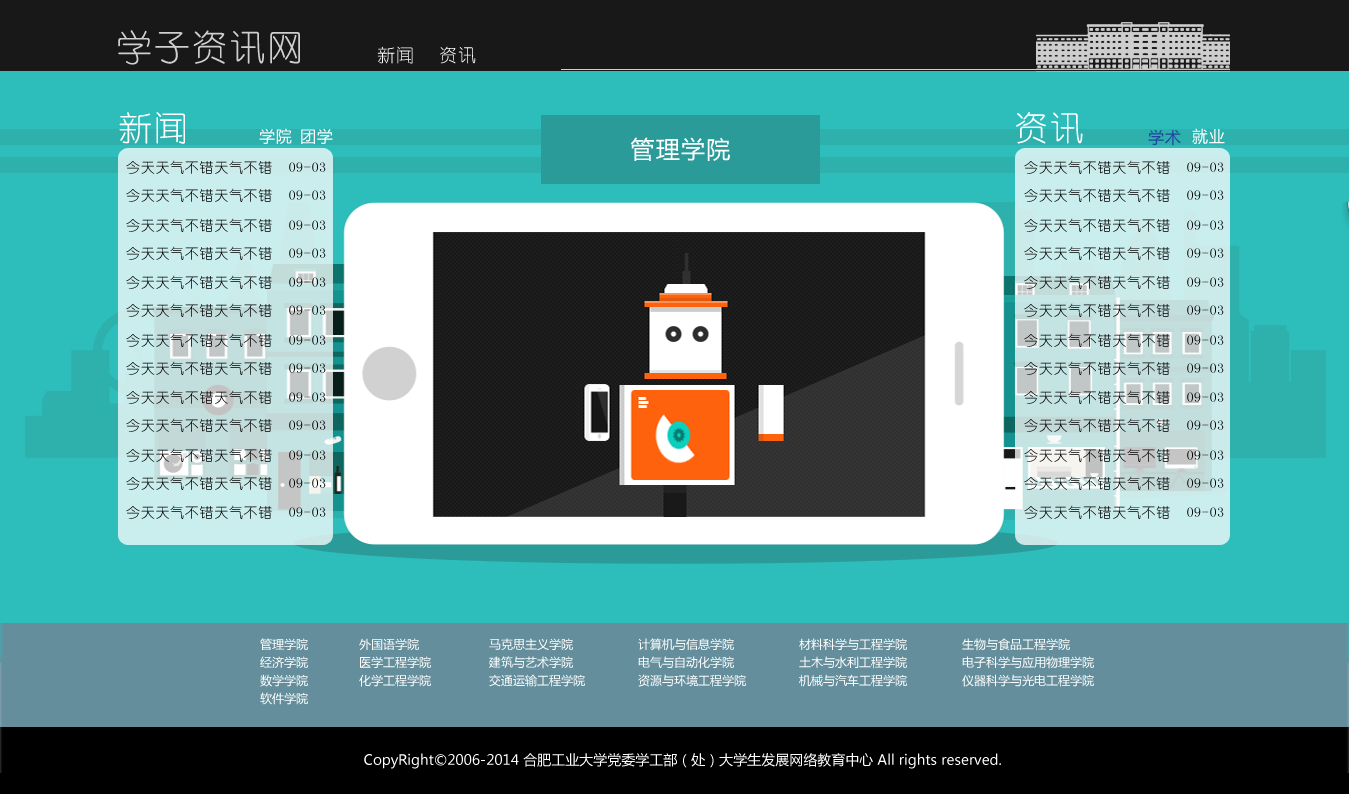
<style>
.page{position:relative;width:1349px;height:794px;background:#2dbdba}
.page>*{position:absolute;margin:0}
.t1{font:36px "YouYuan";letter-spacing:0.05em;color:#cfcfcf}
.t2{font:18px "YouYuan";letter-spacing:0.05em;color:#ffffff}
.t3{font:34px "YouYuan";letter-spacing:0.05em;color:#ffffff}
.t4{font:16px "MicrosoftYaHei";letter-spacing:0.05em;color:#ffffff}
.t5{font:24px "MicrosoftYaHei";letter-spacing:0.05em;color:#ffffff}
.t6{font:16px "MicrosoftYaHei";letter-spacing:0.05em;color:#1e459e}
.t7{font:14px "YouYuan";letter-spacing:0.05em;color:#000000}
.t8{font:12px/18px "MicrosoftYaHei";color:#ffffff}
.t9{font:14px "MicrosoftYaHei";color:#ffffff}
</style>
<div class="page">
<p class="t1" style="left:118px;top:30px;width:182px;height:35px">学子资讯网</p>
<p class="t2" style="left:377px;top:46px;width:36px;height:18px">新闻</p>
<p class="t2" style="left:440px;top:46px;width:36px;height:18px">资讯</p>
<p class="t3" style="left:119px;top:112px;width:66px;height:32px">新闻</p>
<p class="t3" style="left:1016px;top:112px;width:67px;height:32px">资讯</p>
<p class="t4" style="left:259px;top:128px;width:33px;height:16px">学院</p>
<p class="t4" style="left:301px;top:128px;width:32px;height:16px">团学</p>
<p class="t5" style="left:630px;top:137px;width:100px;height:24px">管理学院</p>
<p class="t6" style="left:1148px;top:129px;width:33px;height:17px">学术</p>
<p class="t4" style="left:1192px;top:128px;width:33px;height:17px">就业</p>
<p class="t7" style="left:126px;top:160px;width:200px;height:14px">今天天气不错天气不错  09-03</p>
<p class="t7" style="left:1024px;top:160px;width:200px;height:14px">今天天气不错天气不错  09-03</p>
<p class="t7" style="left:126px;top:188px;width:200px;height:14px">今天天气不错天气不错  09-03</p>
<p class="t7" style="left:1024px;top:188px;width:200px;height:14px">今天天气不错天气不错  09-03</p>
<p class="t7" style="left:126px;top:218px;width:200px;height:14px">今天天气不错天气不错  09-03</p>
<p class="t7" style="left:1024px;top:218px;width:200px;height:14px">今天天气不错天气不错  09-03</p>
<p class="t7" style="left:126px;top:246px;width:200px;height:14px">今天天气不错天气不错  09-03</p>
<p class="t7" style="left:1024px;top:246px;width:200px;height:14px">今天天气不错天气不错  09-03</p>
<p class="t7" style="left:126px;top:275px;width:200px;height:14px">今天天气不错天气不错  09-03</p>
<p class="t7" style="left:1024px;top:275px;width:200px;height:14px">今天天气不错天气不错  09-03</p>
<p class="t7" style="left:126px;top:303px;width:200px;height:14px">今天天气不错天气不错  09-03</p>
<p class="t7" style="left:1024px;top:303px;width:200px;height:14px">今天天气不错天气不错  09-03</p>
<p class="t7" style="left:126px;top:333px;width:200px;height:14px">今天天气不错天气不错  09-03</p>
<p class="t7" style="left:1024px;top:333px;width:200px;height:14px">今天天气不错天气不错  09-03</p>
<p class="t7" style="left:126px;top:361px;width:200px;height:14px">今天天气不错天气不错  09-03</p>
<p class="t7" style="left:1024px;top:361px;width:200px;height:14px">今天天气不错天气不错  09-03</p>
<p class="t7" style="left:126px;top:390px;width:200px;height:14px">今天天气不错天气不错  09-03</p>
<p class="t7" style="left:1024px;top:390px;width:200px;height:14px">今天天气不错天气不错  09-03</p>
<p class="t7" style="left:126px;top:418px;width:200px;height:14px">今天天气不错天气不错  09-03</p>
<p class="t7" style="left:1024px;top:418px;width:200px;height:14px">今天天气不错天气不错  09-03</p>
<p class="t7" style="left:126px;top:448px;width:200px;height:14px">今天天气不错天气不错  09-03</p>
<p class="t7" style="left:1024px;top:448px;width:200px;height:14px">今天天气不错天气不错  09-03</p>
<p class="t7" style="left:126px;top:476px;width:200px;height:14px">今天天气不错天气不错  09-03</p>
<p class="t7" style="left:1024px;top:476px;width:200px;height:14px">今天天气不错天气不错  09-03</p>
<p class="t7" style="left:126px;top:505px;width:200px;height:14px">今天天气不错天气不错  09-03</p>
<p class="t7" style="left:1024px;top:505px;width:200px;height:14px">今天天气不错天气不错  09-03</p>
<p class="t8" style="left:260px;top:638px;width:48px;height:67px">管理学院<br>经济学院<br>数学学院<br>软件学院</p>
<p class="t8" style="left:359px;top:638px;width:72px;height:49px">外国语学院<br>医学工程学院<br>化学工程学院</p>
<p class="t8" style="left:489px;top:638px;width:96px;height:49px">马克思主义学院<br>建筑与艺术学院<br>交通运输工程学院</p>
<p class="t8" style="left:638px;top:638px;width:108px;height:49px">计算机与信息学院<br>电气与自动化学院<br>资源与环境工程学院</p>
<p class="t8" style="left:799px;top:638px;width:108px;height:49px">材料科学与工程学院<br>土木与水利工程学院<br>机械与汽车工程学院</p>
<p class="t8" style="left:962px;top:638px;width:132px;height:49px">生物与食品工程学院<br>电子科学与应用物理学院<br>仪器科学与光电工程学院</p>
<p class="t9" style="left:364px;top:753px;width:637px;height:16px">CopyRight©2006-2014 合肥工业大学党委学工部（处）大学生发展网络教育中心 All rights reserved.</p>
</div>
